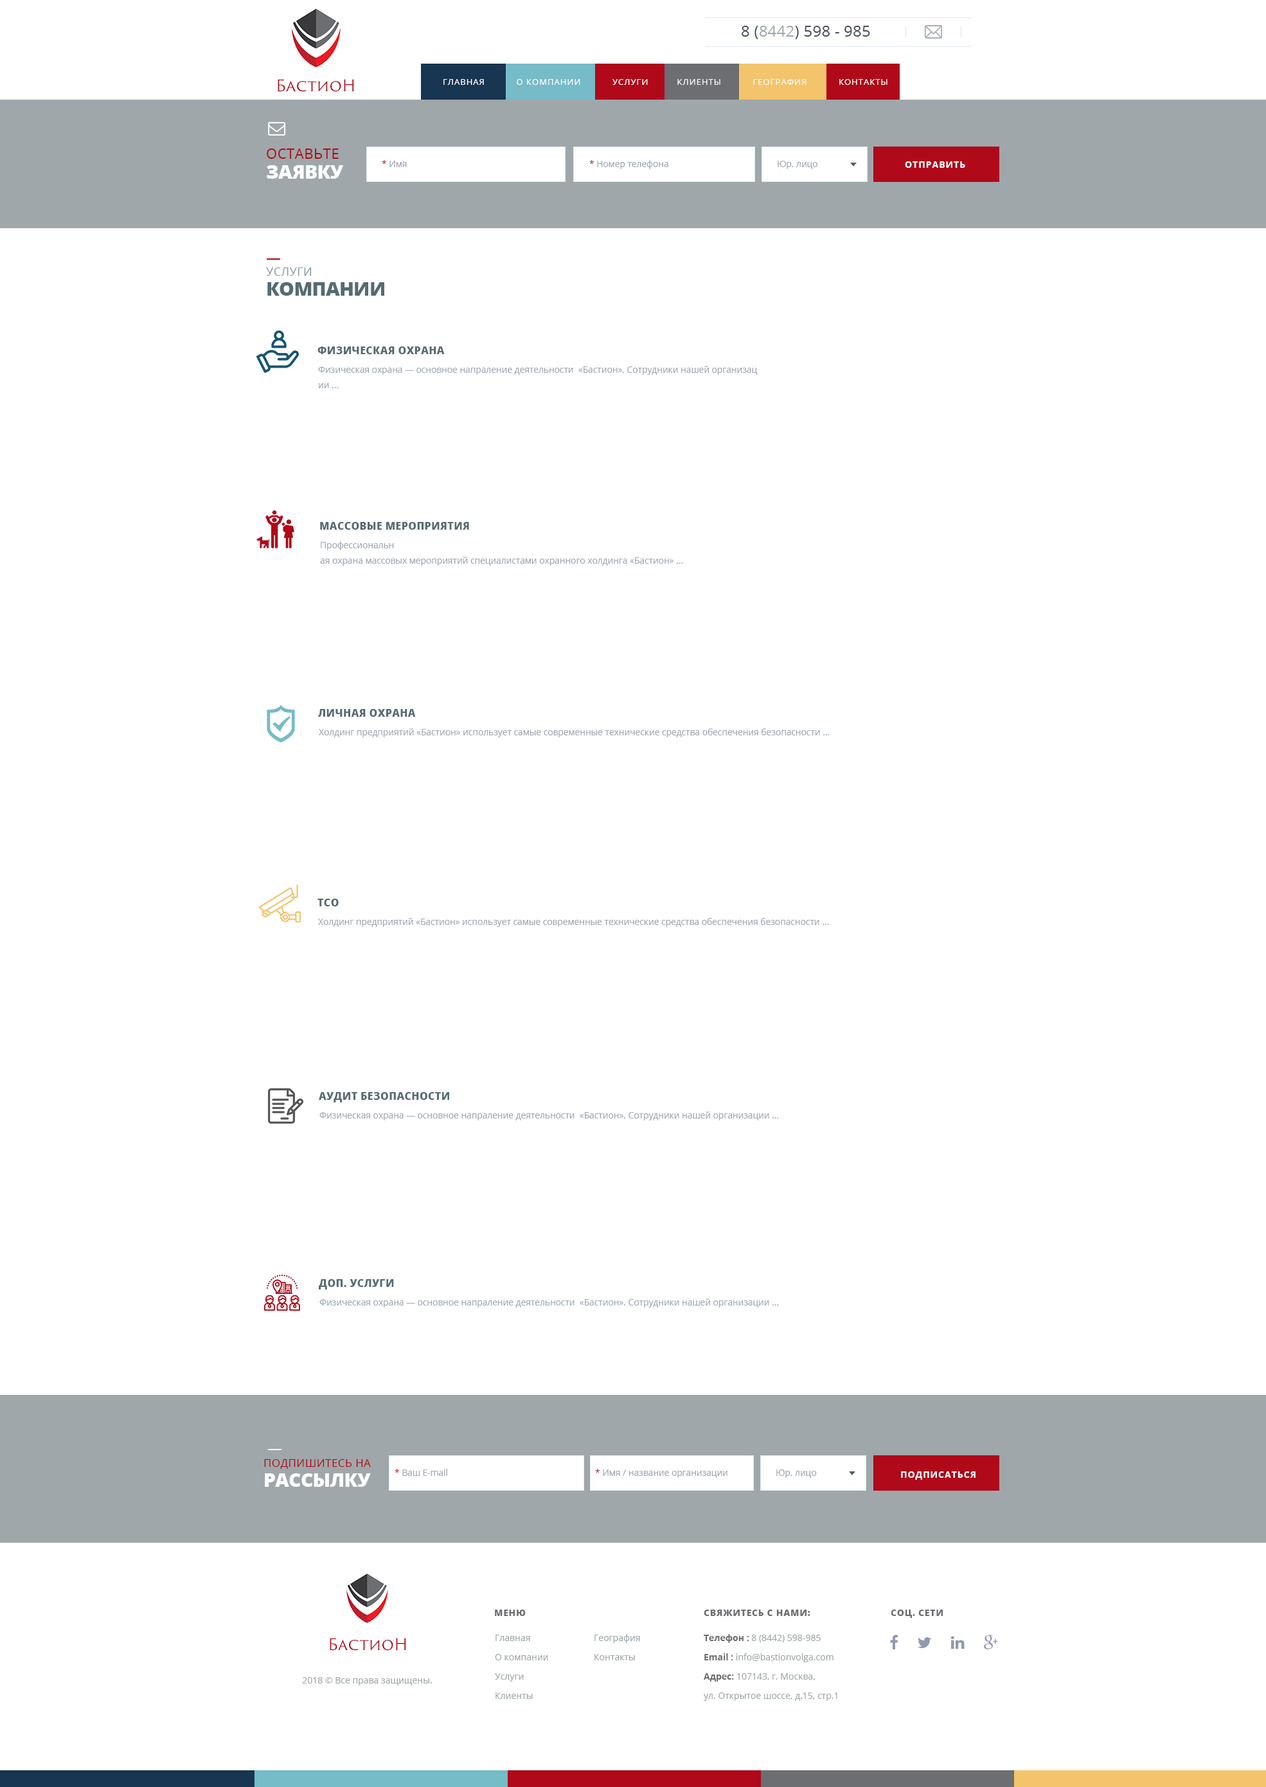
<style>
.page{position:relative;width:1266px;height:1787px;background:#ffffff}
.page>*{position:absolute;margin:0}
.t1{font:15.4px "OpenSans";letter-spacing:0.01em;color:#484e57}
.t2{font:15.4px "OpenSans";letter-spacing:0.01em;color:#9fa7aa}
.t3{font:15.7px "TrajanSansPro-Regular";color:#af091a}
.t4{font:8.4px "OpenSans";letter-spacing:0.08em;color:#fefefe;text-transform:uppercase}
.t5{font:14.1px/19.9px "OpenSans";letter-spacing:0.025em;color:#af091a;text-transform:uppercase}
.t6{font:19.3px/19.9px "OpenSans-Extrabold";letter-spacing:-0.025em;color:#ffffff;text-transform:uppercase}
.t7{font:8.7px "OpenSans";letter-spacing:0.01em;color:#a0a9b6}
.t8{font:8.7px "OpenSans";letter-spacing:0.01em;color:#af091a}
.t9{font:8.7px "OpenSans-Bold";letter-spacing:0.1em;color:#ffffff;text-transform:uppercase}
.t10{font:19.3px/19.9px "OpenSans-Extrabold";letter-spacing:-0.025em;color:#556b72;text-transform:uppercase}
.t11{font:11.6px/19.9px "OpenSans";letter-spacing:0.025em;color:#859aa1;text-transform:uppercase}
.t12{font:10.3px "OpenSans-Extrabold";letter-spacing:0.025em;color:#556b72;text-transform:uppercase}
.t13{font:8.7px/15.4px "OpenSans";letter-spacing:0.01em;color:#a0a9b6}
.t14{font:10.9px/19.9px "OpenSans";letter-spacing:0.025em;color:#af091a;text-transform:uppercase}
.t15{font:9px "OpenSans-Extrabold";letter-spacing:0.05em;color:#6d6e72;text-transform:uppercase}
.t16{font:9px/19.3px "OpenSans";color:#9fa7aa}
.t17{font:9px/19.3px "OpenSans-Bold";color:#6d6e72}
.t18{font:9px "OpenSans";color:#9fa7aa}
</style>
<div class="page">
<p class="t1" style="left:742px;top:26px;width:128px;height:13px">8 (<span class="t2">8442</span>) 598 - 985</p>
<p class="t3" style="left:278px;top:79px;width:76px;height:13px">БастиоН</p>
<p class="t4" style="left:444px;top:79px;width:444px;height:6px">Главная           О КОМПАНИИ           УСЛУГИ          КЛИЕНТЫ           География           КОНТАКТЫ</p>
<p class="t4" style="left:444px;top:79px;width:444px;height:6px">Главная           О КОМПАНИИ           УСЛУГИ          КЛИЕНТЫ           География           КОНТАКТЫ</p>
<p class="t5" style="left:267px;top:148px;width:77px;height:31px">оставьте <br><span class="t6">ЗАЯВКУ</span></p>
<p class="t7" style="left:382px;top:160px;width:25px;height:7px"><span class="t8">* </span>Имя</p>
<p class="t7" style="left:590px;top:160px;width:79px;height:9px"><span class="t8">* </span>Номер телефона</p>
<p class="t7" style="left:778px;top:161px;width:40px;height:8px">Юр. лицо</p>
<p class="t9" style="left:905px;top:161px;width:61px;height:7px">ОТПРАВИТЬ</p>
<p class="t10" style="left:266px;top:267px;width:118px;height:29px"><span class="t11">услуги<br></span>компании</p>
<p class="t12" style="left:318px;top:346px;width:127px;height:8px">физическая охрана</p>
<p class="t13" style="left:318px;top:366px;width:440px;height:22px">Физическая охрана — основное напраление деятельности  «Бастион». Сотрудники нашей организац<br>ии ...</p>
<p class="t12" style="left:320px;top:522px;width:149px;height:8px">МАССОВЫЕ МЕРОПРИЯТИЯ</p>
<p class="t13" style="left:320px;top:541px;width:363px;height:25px">Профессиональн<br>ая охрана массовых мероприятий специалистами охранного холдинга «Бастион» ...</p>
<p class="t12" style="left:318px;top:709px;width:98px;height:8px">личная охрана</p>
<p class="t7" style="left:319px;top:728px;width:511px;height:9px">Холдинг предприятий «Бастион» использует самые современные технические средства обеспечения безопасности ...</p>
<p class="t12" style="left:318px;top:899px;width:21px;height:7px">ТСО</p>
<p class="t7" style="left:318px;top:918px;width:511px;height:9px">Холдинг предприятий «Бастион» использует самые современные технические средства обеспечения безопасности ...</p>
<p class="t12" style="left:319px;top:1092px;width:130px;height:10px">аудит безопасности</p>
<p class="t7" style="left:320px;top:1112px;width:459px;height:8px">Физическая охрана — основное напраление деятельности  «Бастион». Сотрудники нашей организации ...</p>
<p class="t12" style="left:319px;top:1279px;width:75px;height:11px">Доп. УСЛУГИ</p>
<p class="t7" style="left:320px;top:1299px;width:459px;height:9px">Физическая охрана — основное напраление деятельности  «Бастион». Сотрудники нашей организации ...</p>
<p class="t14" style="left:264px;top:1459px;width:107px;height:28px">подпишитесь на<br><span class="t6">рассылку</span></p>
<p class="t7" style="left:395px;top:1469px;width:52px;height:7px"><span class="t8">* </span>Ваш E-mail</p>
<p class="t7" style="left:595px;top:1469px;width:133px;height:9px"><span class="t8">* </span>Имя / название организации</p>
<p class="t7" style="left:777px;top:1470px;width:40px;height:8px">Юр. лицо</p>
<p class="t9" style="left:901px;top:1472px;width:75px;height:8px">подписаться</p>
<p class="t15" style="left:495px;top:1610px;width:31px;height:6px">меню</p>
<p class="t15" style="left:704px;top:1610px;width:107px;height:6px">свяжитесь с нами:</p>
<p class="t15" style="left:891px;top:1610px;width:52px;height:8px">соц. сети</p>
<p class="t16" style="left:495px;top:1635px;width:53px;height:64px">Главная<br>О компании<br>Услуги<br>Клиенты</p>
<p class="t16" style="left:595px;top:1634px;width:45px;height:27px">География<br>Контакты</p>
<p class="t16" style="left:704px;top:1634px;width:134px;height:67px"><span class="t17">Телефон : </span>8 (8442) 598-985<br><span class="t17">Email : </span>info@bastionvolga.com<br><span class="t17">Адрес: </span>107143, г. Москва,<br>ул. Открытое шоссе, д.15, стр.1</p>
<p class="t3" style="left:330px;top:1638px;width:76px;height:13px">БастиоН</p>
<p class="t18" style="left:302px;top:1677px;width:130px;height:9px">2018 © Все права защищены.</p>
</div>
